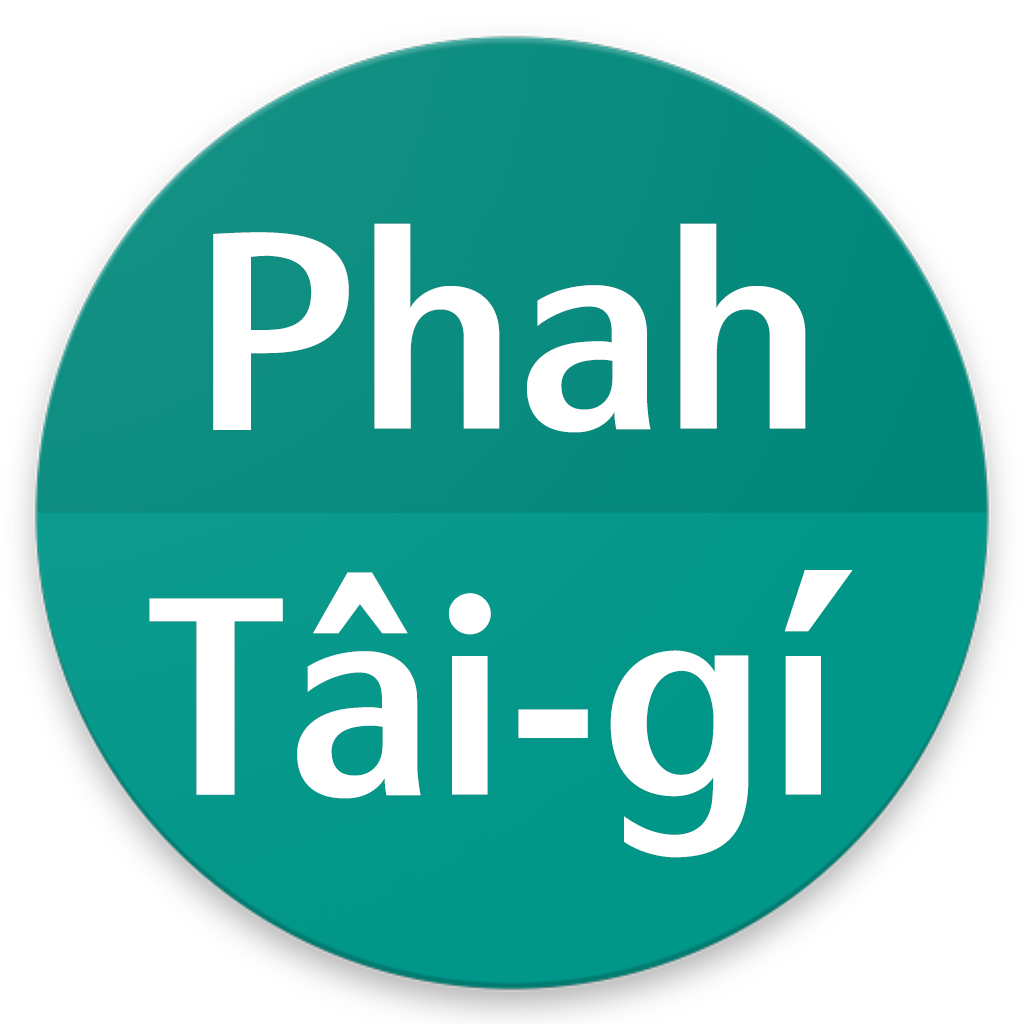
<style>
.page{position:relative;width:1024px;height:1024px;background:#ffffff}
.page>*{position:absolute;margin:0}
.t1{font:266.7px "jf-jinxuan-Bold";color:#ffffff}
</style>
<div class="page">
<p class="t1" style="left:213px;top:223px;width:593px;height:210px">Phah</p>
<p class="t1" style="left:149px;top:570px;width:704px;height:288px">Tâi-gí</p>
</div>
